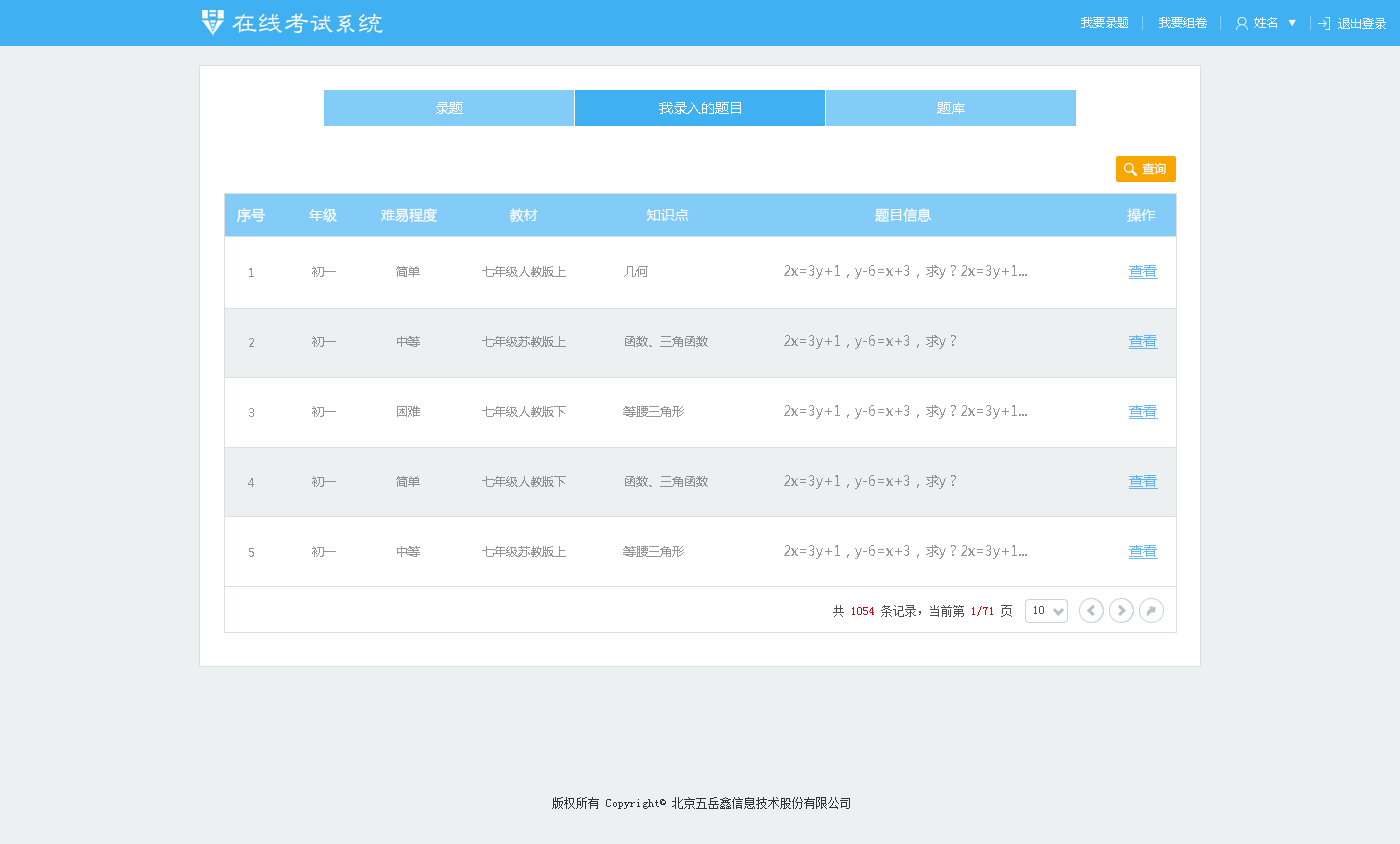
<style>
.page{position:relative;width:1400px;height:844px;background:#ecf0f1}
.page>*{position:absolute;margin:0}
.t1{font:26px "GBJenLei-Medium";color:#ffffff}
.t2{font:24px "GBJenLei-Medium";color:#ffffff}
.t3{font:12px "MicrosoftYaHei";color:#ffffff}
.t4{font:14px "MicrosoftYaHei";color:#ffffff}
.t5{font:12px/70px "MicrosoftYaHei";color:#959595}
.t6{font:12px/70px "MicrosoftYaHei";color:#8f9090}
.t7{font:14px/70px "MicrosoftYaHei";color:#959595}
.t8{font:14px/70px "MicrosoftYaHei";color:#6cb7f0;text-decoration:underline}
.t9{font:12px "SimSun";color:#4f4f4f}
.t10{font:12px "SimSun";color:#d7000f}
.t11{font:12px "NSimSun";color:#333333}
</style>
<div class="page">
<p class="t1" style="left:232px;top:13px;width:151px;height:21px">在线考<span class="t2">试系</span>统</p>
<p class="t3" style="left:1081px;top:17px;width:47px;height:11px;opacity:0.9">我要录题</p>
<p class="t3" style="left:1159px;top:17px;width:48px;height:11px;opacity:0.9">我要组卷</p>
<p class="t3" style="left:1254px;top:17px;width:23px;height:11px;opacity:0.9">姓名</p>
<p class="t3" style="left:1338px;top:18px;width:48px;height:11px;opacity:0.9">退出登录</p>
<p class="t4" style="left:436px;top:102px;width:27px;height:12px">录题</p>
<p class="t4" style="left:659px;top:102px;width:82px;height:12px">我录入的题目</p>
<p class="t4" style="left:937px;top:102px;width:28px;height:12px">题库</p>
<p class="t3" style="left:1142px;top:162px;width:24px;height:13px">查询</p>
<p class="t4" style="left:237px;top:208px;width:919px;height:15px">序号       年级       难易程度             教材                        知识点                                          题目信息                                          操作</p>
<p class="t5" style="left:248px;top:268px;width:6px;height:289px">1<br>2<br>3<br>4<br>5</p>
<p class="t5" style="left:312px;top:266px;width:24px;height:291px">初一<br>初一<br>初一<br>初一<br>初一</p>
<p class="t5" style="left:396px;top:266px;width:24px;height:291px">简单<br>中等<br>困难<br>简单<br>中等</p>
<p class="t5" style="left:482px;top:266px;width:84px;height:291px">七年级人教版上<br>七年级苏教版上<br>七年级人教版下<br>七年级人教版下<br>七年级苏教版上</p>
<p class="t6" style="left:623px;top:266px;width:85px;height:291px">几何<br>函数、三角函数<br>等腰三角形<br>函数、三角函数<br>等腰三角形</p>
<p class="t7" style="left:784px;top:265px;width:243px;height:294px">2x=3y+1，y-6=x+3，求y？2x=3y+1...<br>2x=3y+1，y-6=x+3，求y？<br>2x=3y+1，y-6=x+3，求y？2x=3y+1...<br>2x=3y+1，y-6=x+3，求y？<br>2x=3y+1，y-6=x+3，求y？2x=3y+1...</p>
<p class="t8" style="left:1129px;top:265px;width:29px;height:294px">查看<br>查看<br>查看<br>查看<br>查看</p>
<p class="t9" style="left:833px;top:605px;width:179px;height:12px">共 <span class="t10">1054 </span>条记录，当前第 <span class="t10">1/71 </span>页</p>
<p class="t9" style="left:1034px;top:606px;width:10px;height:8px">10</p>
<p class="t11" style="left:552px;top:797px;width:298px;height:12px">版权所有 Copyright© 北京五岳鑫信息技术股份有限公司</p>
</div>
